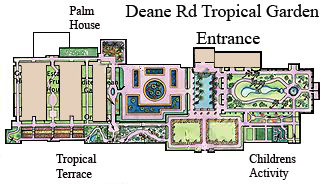
<style>
.page{position:relative;width:325px;height:192px;background:#ffffff}
.page>*{position:absolute;margin:0}
.t1{font:12px "TimesNewRomanPSMT";color:#0a0103}
.t2{font:18px "TimesNewRomanPSMT";color:#000000}
</style>
<div class="page">
<p class="t1" style="left:69px;top:6px;width:31px;height:23px">Palm <br>House</p>
<p class="t2" style="left:125px;top:4px;width:194px;height:17px">Deane Rd Tropical Garden</p>
<p class="t2" style="left:196px;top:32px;width:64px;height:12px">Entrance</p>
<p class="t1" style="left:56px;top:154px;width:41px;height:24px">Tropical <br>Terrace</p>
<p class="t1" style="left:249px;top:154px;width:47px;height:26px">Childrens<br>Activity</p>
</div>
